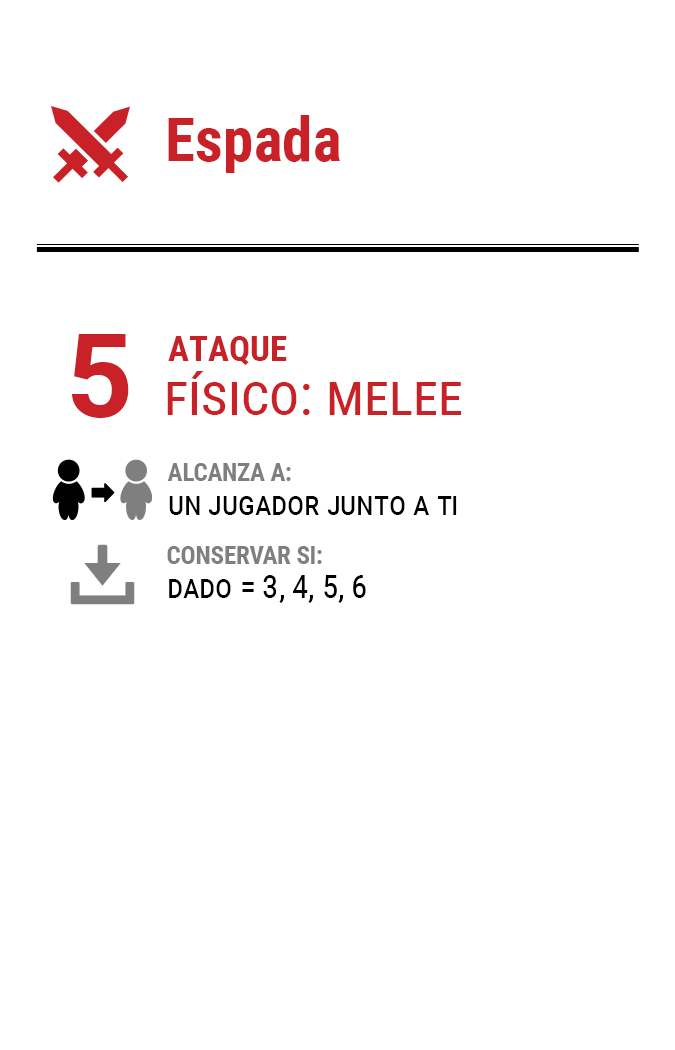
<style>
.page{position:relative;width:675px;height:1050px;background:#ffffff}
.page>*{position:absolute;margin:0}
.t1{font:61.2px "RobotoCondensed-Bold";color:#c82127}
.t2{font:116.7px "Roboto-Bold";letter-spacing:-0.16em;color:#c82127}
.t3{font:35px "RobotoCondensed-Bold";color:#c82127}
.t4{font:58.3px "RobotoCondensed-Regular";color:#c82127;font-variant:small-caps}
.t5{font:33.3px/33.3px "RobotoCondensed-Regular";letter-spacing:-0.01em;color:#000000;font-variant:small-caps}
.t6{font:25px/33.3px "RobotoCondensed-Bold";letter-spacing:-0.01em;color:#7f7f7f}
</style>
<div class="page">
<p class="t1" style="left:168px;top:115px;width:172px;height:58px">Espada</p>
<p class="t2" style="left:72px;top:334px;width:57px;height:84px">5</p>
<p class="t3" style="left:168px;top:336px;width:119px;height:29px">ATAQUE</p>
<p class="t4" style="left:167px;top:371px;width:294px;height:44px">físico: melee</p>
<p class="t5" style="left:167px;top:463px;width:290px;height:52px"><span class="t6">ALCANZA A:<br></span>un jugador junto a ti</p>
<p class="t5" style="left:167px;top:546px;width:199px;height:57px"><span class="t6">CONSERVAR SI:<br></span>dado = 3, 4, 5, 6</p>
</div>
